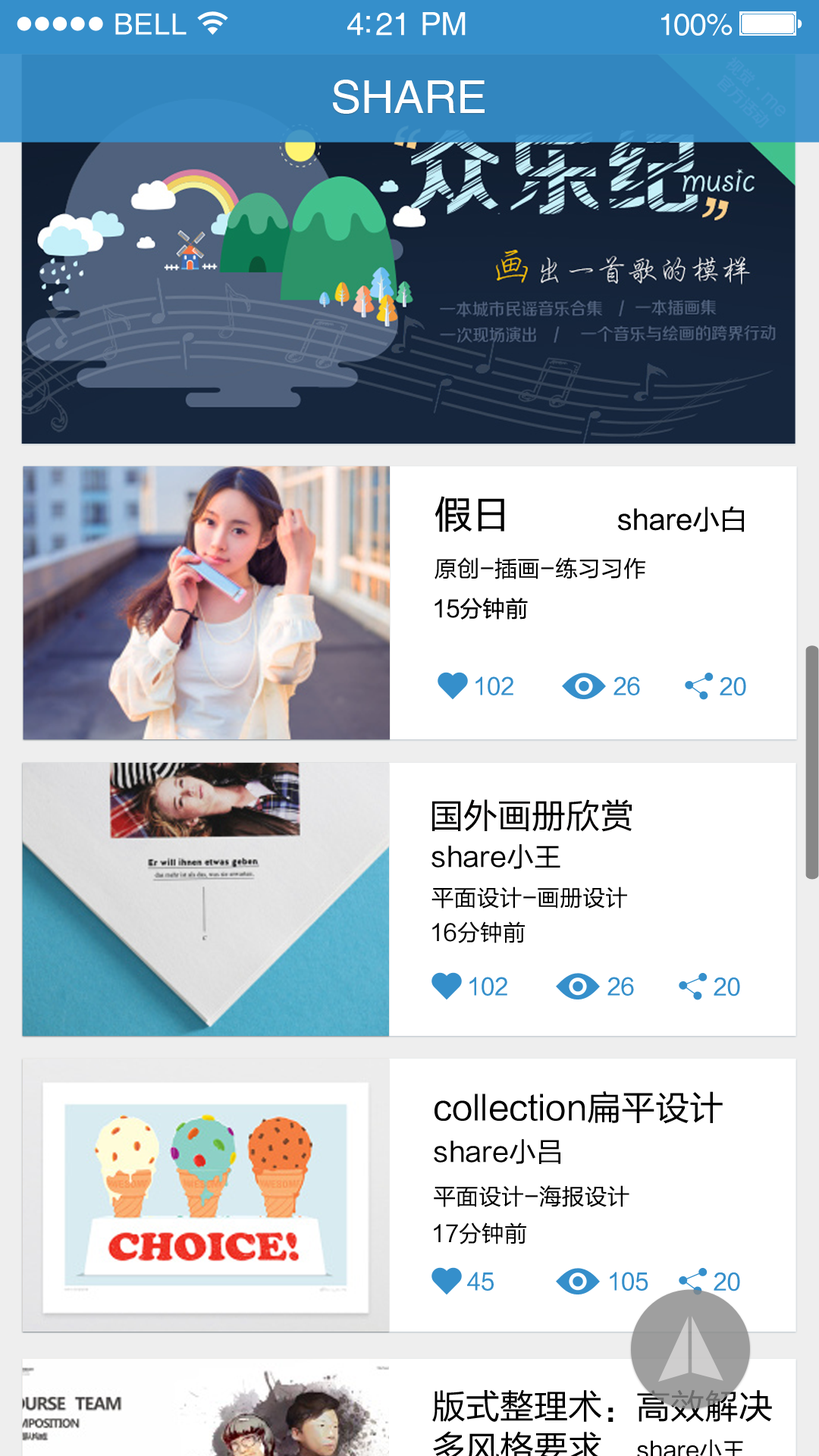
<style>
.page{position:relative;width:819px;height:1456px;background:#ffffff}
.page>*{position:absolute;margin:0}
.t1{font:29.3px "Helvetica";letter-spacing:0.02em;color:#ffffff}
.t2{font:31.8px "Helvetica";letter-spacing:-0.02em;color:#ffffff}
.t3{font:30.6px "Helvetica";letter-spacing:-0.02em;color:#ffffff}
.t4{font:45.5px "Helvetica";color:#ffffff}
.t5{font:37.9px "FZLTHJW--GB1-0";color:#000000}
.t6{font:27.3px "FZLTHJW--GB1-0";color:#000000}
.t7{font:22.7px "FZLTHJW--GB1-0";color:#000000}
.t8{font:22.7px "FZLTHJW--GB1-0";color:#358fcb}
.t9{font:34.1px "FZLTHJW--GB1-0";color:#010000}
.t10{font:34.1px "FZLTHJW--GB1-0";color:#000000}
</style>
<div class="page">
<p class="t1" style="left:115px;top:13px;width:72px;height:22px">BELL</p>
<p class="t2" style="left:347px;top:12px;width:119px;height:24px">4:21 PM</p>
<p class="t3" style="left:661px;top:14px;width:72px;height:22px">100%</p>
<p class="t4" style="left:332px;top:80px;width:153px;height:34px">SHARE</p>
<p class="t5" style="left:435px;top:496px;width:69px;height:36px">假日</p>
<p class="t6" style="left:617px;top:506px;width:127px;height:26px">share小白</p>
<p class="t7" style="left:435px;top:557px;width:210px;height:22px">原创-插画-练习习作</p>
<p class="t7" style="left:435px;top:598px;width:93px;height:22px">15分钟前</p>
<p class="t8" style="left:475px;top:676px;width:38px;height:19px">102</p>
<p class="t8" style="left:613px;top:676px;width:27px;height:19px">26</p>
<p class="t8" style="left:720px;top:677px;width:26px;height:19px">20</p>
<p class="t9" style="left:432px;top:799px;width:200px;height:33px">国外画册欣赏</p>
<p class="t6" style="left:431px;top:844px;width:129px;height:25px">share小王</p>
<p class="t7" style="left:431px;top:886px;width:196px;height:22px">平面设计-画册设计</p>
<p class="t7" style="left:432px;top:921px;width:93px;height:22px">16分钟前</p>
<p class="t8" style="left:469px;top:977px;width:38px;height:19px">102</p>
<p class="t8" style="left:607px;top:977px;width:27px;height:19px">26</p>
<p class="t8" style="left:714px;top:977px;width:26px;height:19px">20</p>
<p class="t10" style="left:435px;top:1091px;width:288px;height:33px">collection扁平设计</p>
<p class="t6" style="left:434px;top:1139px;width:126px;height:25px">share小吕</p>
<p class="t7" style="left:434px;top:1185px;width:195px;height:22px">平面设计-海报设计</p>
<p class="t7" style="left:434px;top:1222px;width:92px;height:22px">17分钟前</p>
<p class="t8" style="left:467px;top:1272px;width:27px;height:19px">45</p>
<p class="t8" style="left:610px;top:1272px;width:38px;height:19px">105</p>
<p class="t8" style="left:714px;top:1272px;width:26px;height:19px">20</p>
</div>
